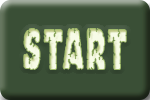
<style>
.page{position:relative;width:150px;height:100px;background:#3a4f36}
.page>*{position:absolute;margin:0}
.t1{font:51.4px "JFRockSolid";letter-spacing:0.05em;scale:0.53 1}
</style>
<div class="page">
<p class="t1" style="left:23px;top:28px;width:104px;height:42px">START</p>
</div>
